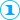
<style>
.page{position:relative;width:20px;height:20px;background:#ffffff}
.page>*{position:absolute;margin:0}
.t1{font:14.6px "LatinWide";color:#03a9ff;scale:0.76 1}
</style>
<div class="page">
<p class="t1" style="left:5px;top:5px;width:10px;height:10px">1</p>
</div>
